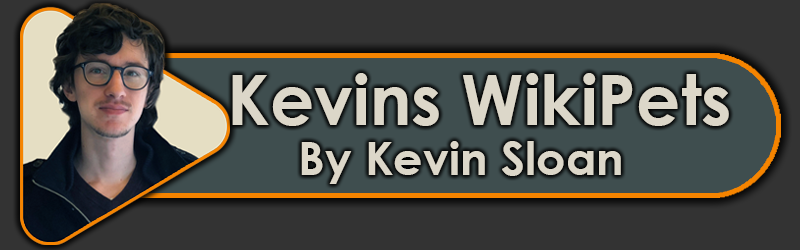
<style>
.page{position:relative;width:800px;height:250px;background:#333333}
.page>*{position:absolute;margin:0}
.t1{font:69.3px "CenturyGothic-Bold";color:#dcd7c9}
.t2{font:46.2px "CenturyGothic-Bold";color:#dcd7c9}
</style>
<div class="page">
<p class="t1" style="left:232px;top:73px;width:497px;height:53px">Kevins WikiPets</p>
<p class="t2" style="left:301px;top:141px;width:320px;height:43px">By Kevin Sloan</p>
</div>
